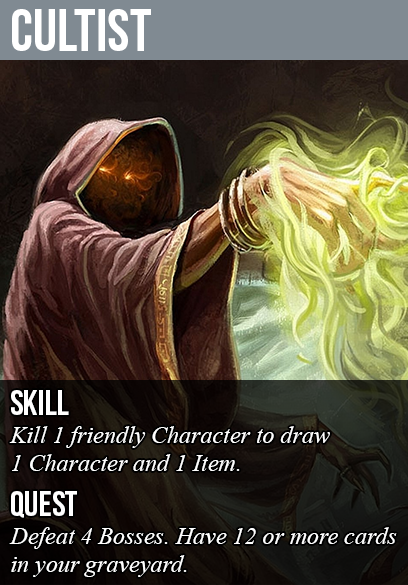
<style>
.page{position:relative;width:408px;height:585px}
.page>*{position:absolute;margin:0}
.t1{font:60px "BebasNeue";color:#ffffff}
.t2{font:36px "BebasNeue";color:#ffffff}
.t3{font:24px "TimesNewRomanPS-ItalicMT";color:#ffffff}
</style>
<div class="page">
<p class="t1" style="left:12px;top:9px;width:139px;height:42px">cultist</p>
<p class="t2" style="left:11px;top:390px;width:58px;height:25px">skill</p>
<p class="t3" style="left:9px;top:426px;width:321px;height:45px">Kill 1 friendly Character to draw<br>1 Character and 1 Item.</p>
<p class="t2" style="left:11px;top:491px;width:66px;height:27px">quest</p>
<p class="t3" style="left:9px;top:527px;width:388px;height:50px">Defeat 4 Bosses. Have 12 or more cards<br>in your graveyard.</p>
</div>
